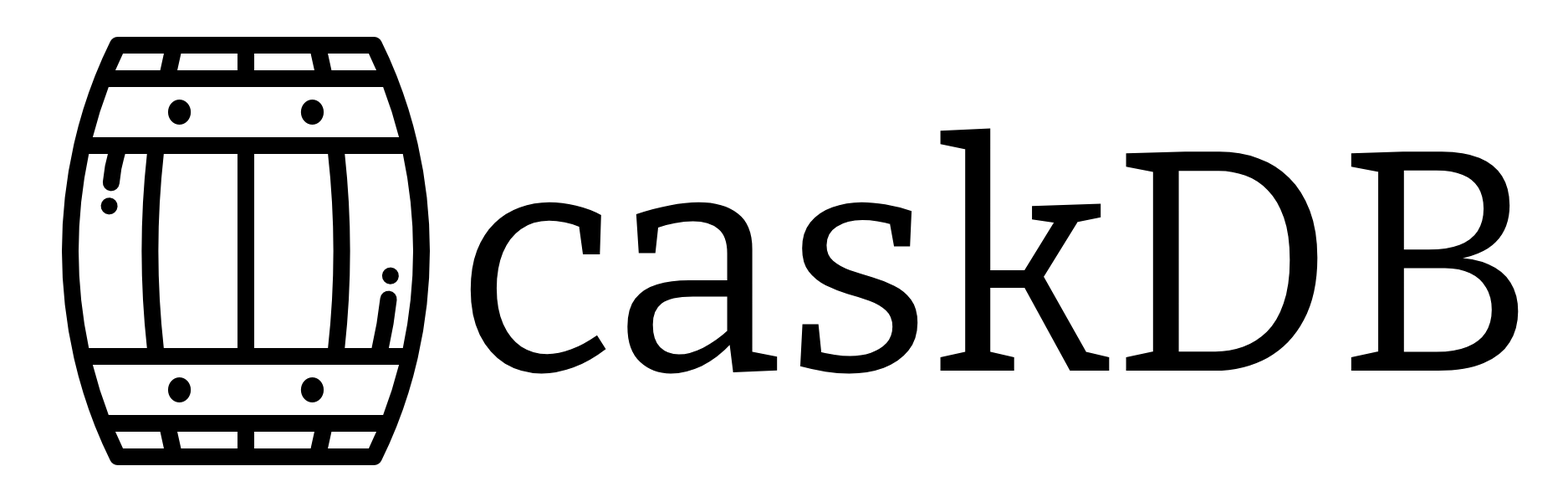
<style>
.page{position:relative;width:1568px;height:502px;background:#ffffff}
.page>*{position:absolute;margin:0}
.t1{font:313.6px "Bitter-Regular";color:#000000}
</style>
<div class="page">
<p class="t1" style="left:470px;top:128px;width:1049px;height:246px">caskDB</p>
</div>
